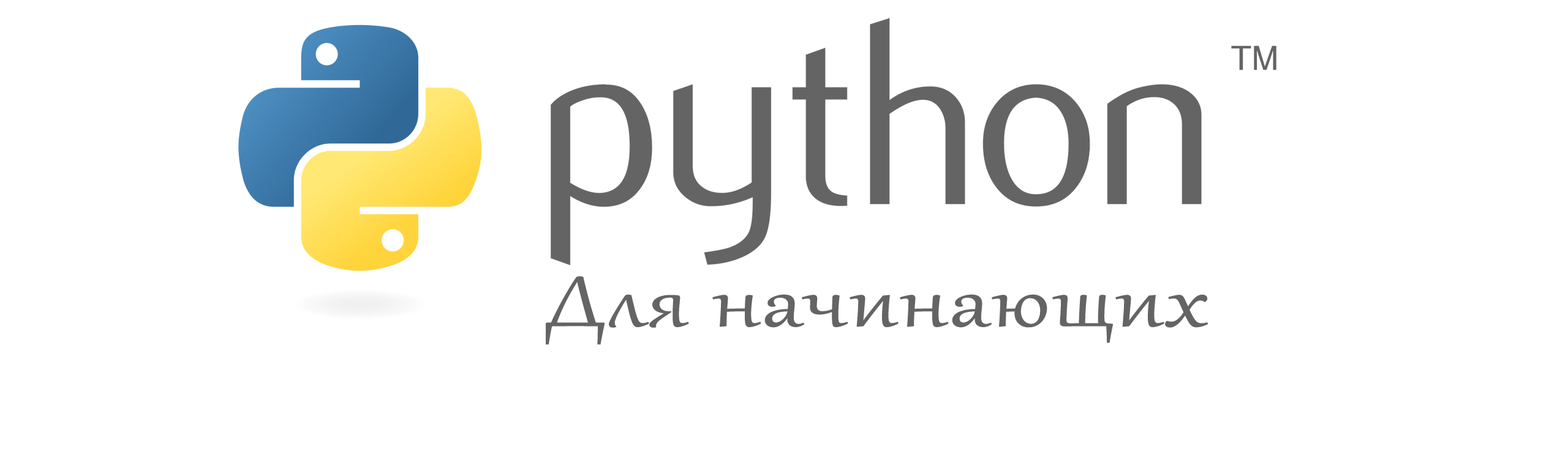
<style>
.page{position:relative;width:1568px;height:465px;background:#ffffff}
.page>*{position:absolute;margin:0}
.t1{font:87.6px "Gabriola";color:#646464;font-weight:bold;scale:1.26 1}
</style>
<div class="page">
<p class="t1" style="left:546px;top:276px;width:662px;height:69px">Для начинающих</p>
</div>
